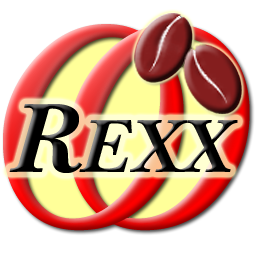
<style>
.page{position:relative;width:256px;height:256px;background:#ffffff}
.page>*{position:absolute;margin:0}
.t1{font:80px "NewBaskerville-BoldItalic";letter-spacing:0.025em;color:#000000}
.t2{font:104px "NewBaskerville-BoldItalic";letter-spacing:0.025em;color:#000000}
</style>
<div class="page">
<p class="t1" style="left:9px;top:104px;width:229px;height:69px"><span class="t2">R</span>EXX</p>
</div>
